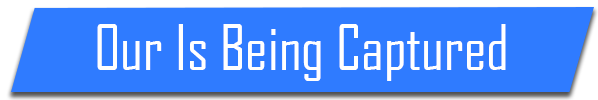
<style>
.page{position:relative;width:598px;height:100px;background:#2f7bff}
.page>*{position:absolute;margin:0}
.t1{font:60px "AgencyFB-Reg";color:#ffffff}
</style>
<div class="page">
<p class="t1" style="left:97px;top:24px;width:409px;height:57px">Our Is Being Captured</p>
</div>
